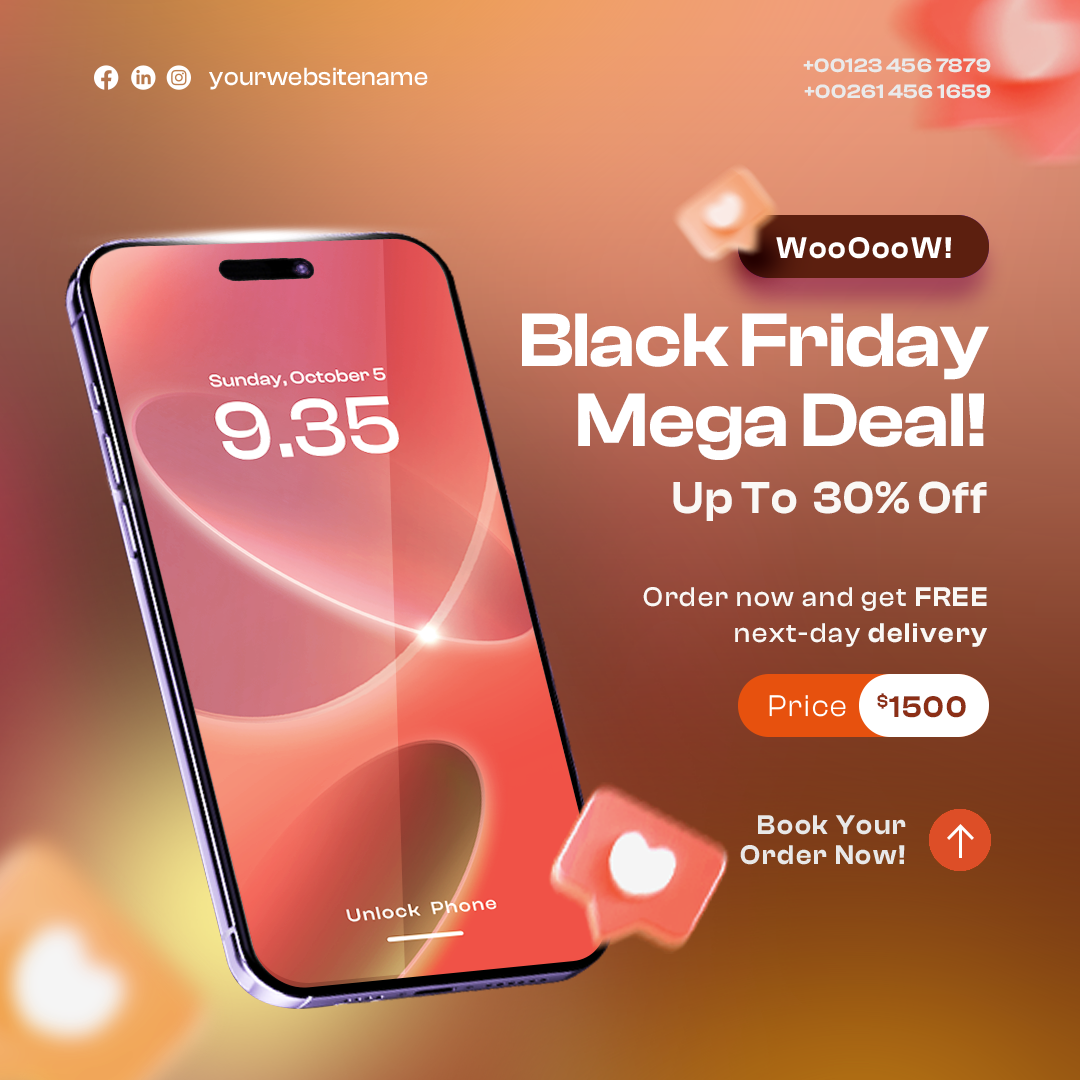
<style>
.page{position:relative;width:1080px;height:1080px}
.page>*{position:absolute;margin:0}
.t1{font:20px "ClashDisplay-Semibold";letter-spacing:0.02em;color:#eaeaea;scale:1.06 1}
.t2{font:25.9px "ClashDisplay-Medium";letter-spacing:0.02em;color:#eaeaea;scale:0.92 1}
.t3{font:30.9px "ClashDisplay-Semibold";letter-spacing:0.075em;color:#ffffff;scale:0.92 1}
.t4{font:78.3px/80.1px "ClashDisplay-Semibold";letter-spacing:-0.01em;color:#ffffff}
.t5{font:46.4px "ClashDisplay-Semibold";letter-spacing:0.025em;color:#faf8f5;scale:0.92 1}
.t6{font:28px/36px "ClashDisplay-Medium";letter-spacing:0.075em;color:#faf8f5;scale:0.92 1}
.t7{font:28px/36px "ClashDisplay-Semibold";letter-spacing:0.075em;color:#faf8f5;scale:0.92 1}
.t8{font:30.9px "ClashDisplay-Regular";letter-spacing:0.075em;color:#ffffff;scale:0.92 1}
.t9{font:30.9px "ClashDisplay-Semibold";letter-spacing:0.075em;color:#8c2f16;scale:0.92 1}
.t10{font:28px/30px "ClashDisplay-Semibold";letter-spacing:0.075em;color:#e8e8e8;scale:0.92 1}
</style>
<div class="page">
<p class="t1" style="left:803px;top:58px;width:188px;height:15px">+00123 456 7879</p>
<p class="t2" style="left:209px;top:67px;width:219px;height:23px">yourwebsitename</p>
<p class="t1" style="left:804px;top:84px;width:187px;height:15px">+00261 456 1659</p>
<p class="t3" style="left:776px;top:237px;width:175px;height:22px">WooOooW!</p>
<p class="t4" style="left:522px;top:313px;width:467px;height:147px;text-align:right">Black Friday<br>Mega Deal!</p>
<p class="t5" style="left:673px;top:481px;width:314px;height:40px">Up To  30% Off</p>
<p class="t6" style="left:643px;top:587px;width:344px;height:60px;text-align:right">Order now and get <span class="t7">FREE<br></span>next-day <span class="t7">delivery</span></p>
<p class="t8" style="left:769px;top:695px;width:77px;height:22px">Price</p>
<p class="t9" style="left:877px;top:693px;width:89px;height:25px">$1500</p>
<p class="t10" style="left:740px;top:815px;width:166px;height:50px;text-align:right">Book Your<br>Order Now!</p>
</div>
